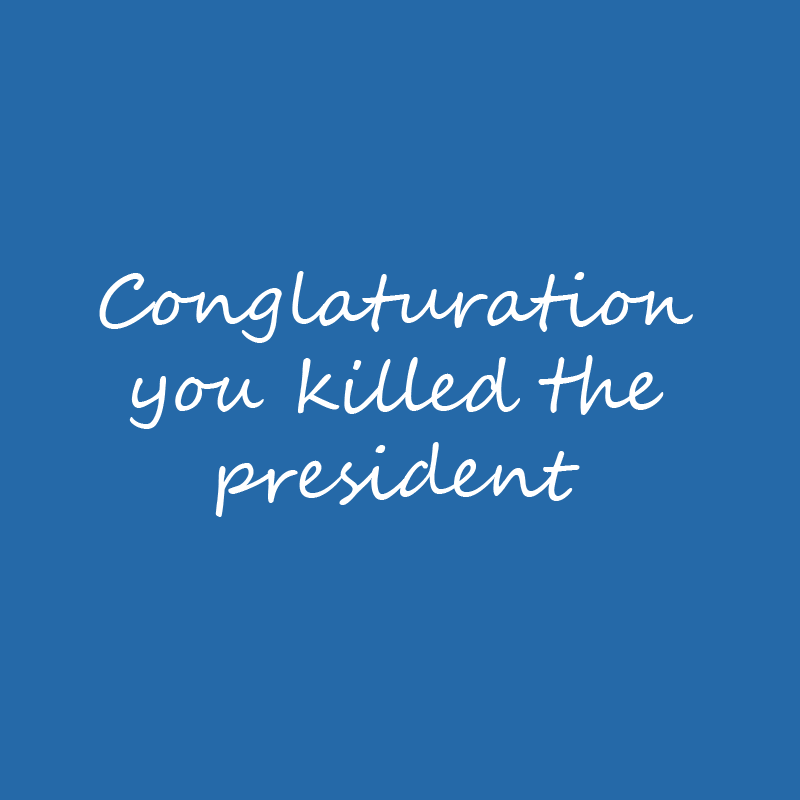
<style>
.page{position:relative;width:800px;height:800px;background:#2569a8}
.page>*{position:absolute;margin:0}
.t1{font:72px "SegoeScript";color:#ffffff}
</style>
<div class="page">
<p class="t1" style="left:99px;top:271px;width:594px;height:246px;text-align:center">Conglaturation<br>you killed the<br>president</p>
</div>
